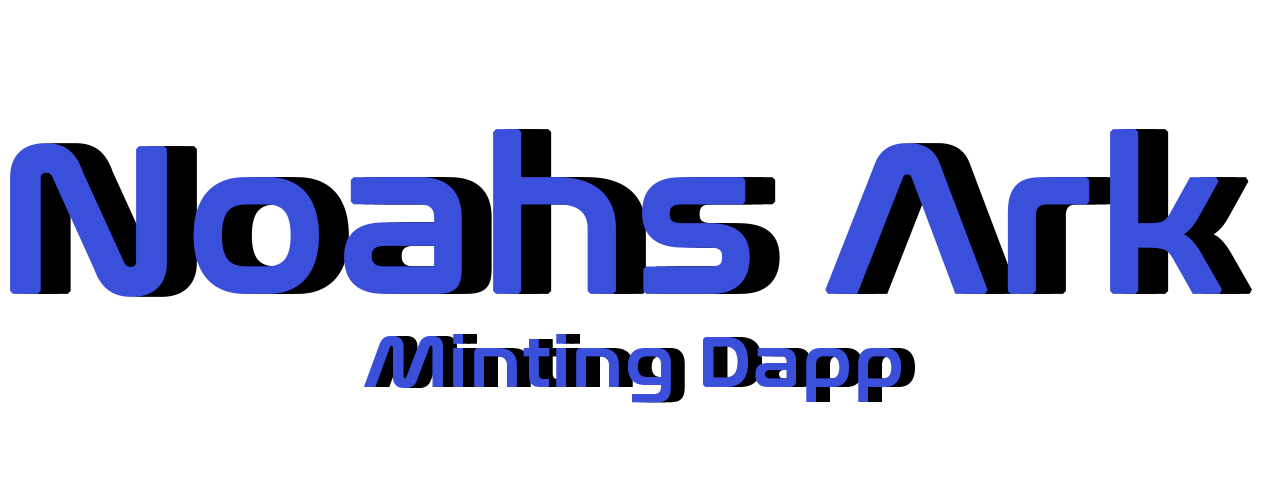
<style>
.page{position:relative;width:1279px;height:504px;background:#ffffff}
.page>*{position:absolute;margin:0}
.t1{font:210px "NasalizationRg-Regular";color:#3a50db;font-weight:bold}
.t2{font:210px "NasalizationRg-Regular";font-weight:bold}
.t3{font:210px "NasalizationRg-Regular";color:#000000;font-weight:bold}
.t4{font:72px "NasalizationRg-Regular";color:#3a50db;font-weight:bold}
.t5{font:72px "NasalizationRg-Regular";font-weight:bold}
.t6{font:72px "NasalizationRg-Regular";color:#000000;font-weight:bold}
</style>
<div class="page">
<p class="t1" style="left:10px;top:129px;width:1212px;height:168px">Noahs Ark</p>
<p class="t1" style="left:20px;top:129px;width:1212px;height:168px">Noahs Ark</p>
<p class="t2" style="left:30px;top:129px;width:1212px;height:168px">Noahs Ark</p>
<p class="t3" style="left:40px;top:129px;width:1212px;height:168px">Noahs Ark</p>
<p class="t4" style="left:364px;top:334px;width:537px;height:69px">Minting Dapp</p>
<p class="t5" style="left:371px;top:334px;width:537px;height:69px">Minting Dapp</p>
<p class="t6" style="left:378px;top:334px;width:537px;height:69px">Minting Dapp</p>
</div>
